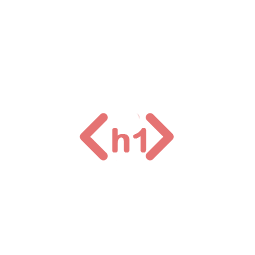
<style>
.page{position:relative;width:255px;height:255px;background:#ffffff}
.page>*{position:absolute;margin:0}
.t1{font:34px "ArialRoundedMTBold";color:#e57373;font-weight:bold}
</style>
<div class="page">
<p class="t1" style="left:112px;top:128px;width:35px;height:25px">h1</p>
</div>
